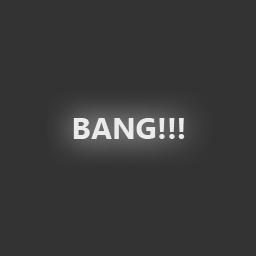
<style>
.page{position:relative;width:256px;height:256px;background:#333333}
.page>*{position:absolute;margin:0}
.t1{font:30px "MicrosoftTaiLe-Bold";color:#ebebeb}
</style>
<div class="page">
<p class="t1" style="left:73px;top:118px;width:112px;height:21px">BANG!!!</p>
</div>
